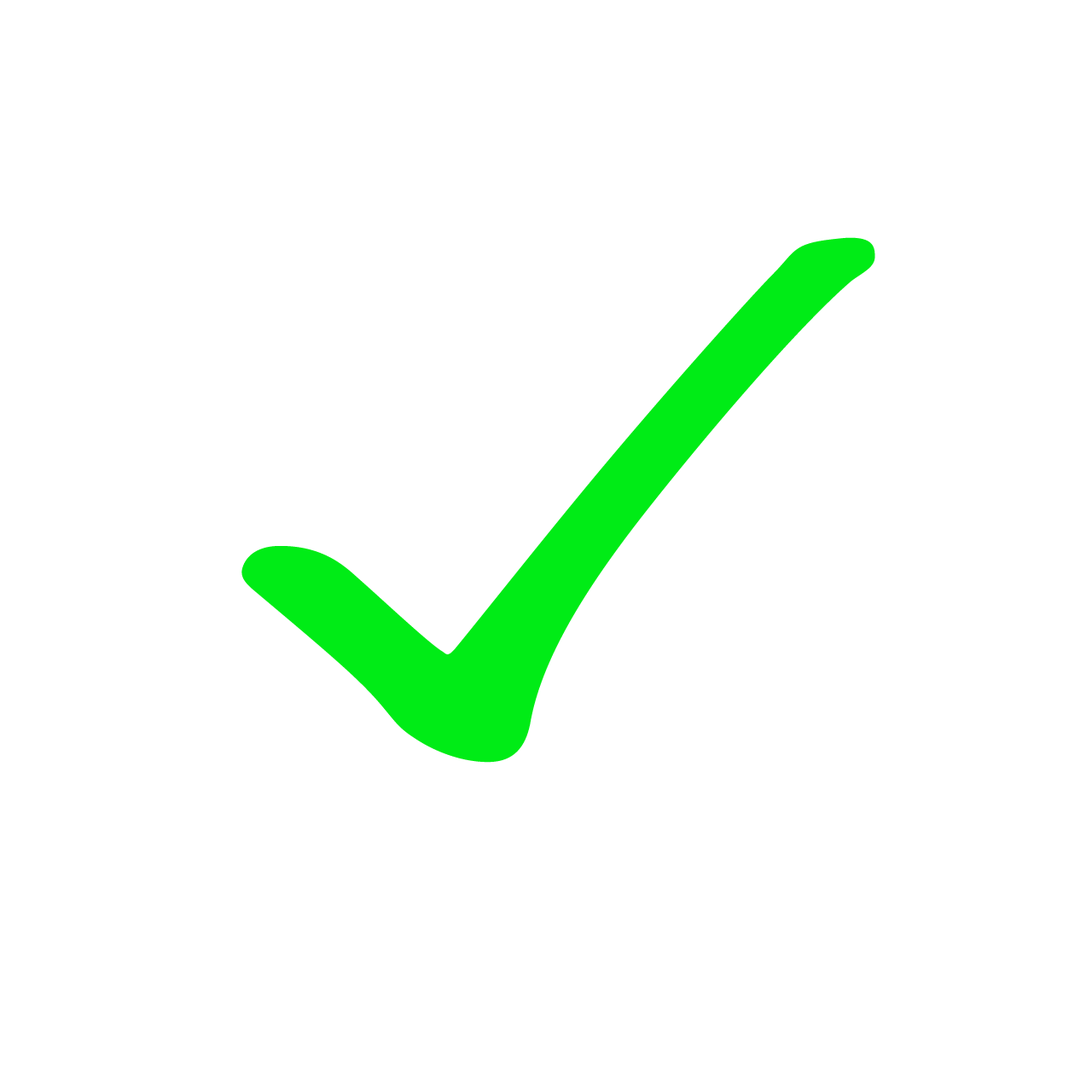
<style>
.page{position:relative;width:1092px;height:1092px;background:#ffffff}
.page>*{position:absolute;margin:0}
.t1{font:895.8px "KozGoPr6N-Regular";letter-spacing:0.025em;color:#00ec16;scale:1.19 1}
</style>
<div class="page">
<p class="t1" style="left:241px;top:237px;width:634px;height:526px">✓</p>
</div>
